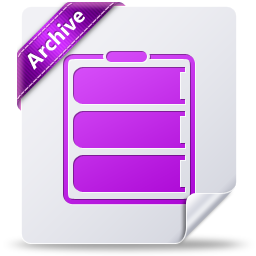
<style>
.page{position:relative;width:256px;height:256px}
.page>*{position:absolute;margin:0}
.t1{font:21px "SegoeUI-Bold";color:#ffffff}
</style>
<div class="page">
<p class="t1" style="left:27px;top:11px;width:58px;height:59px;rotate:-45deg">Archive</p>
</div>
